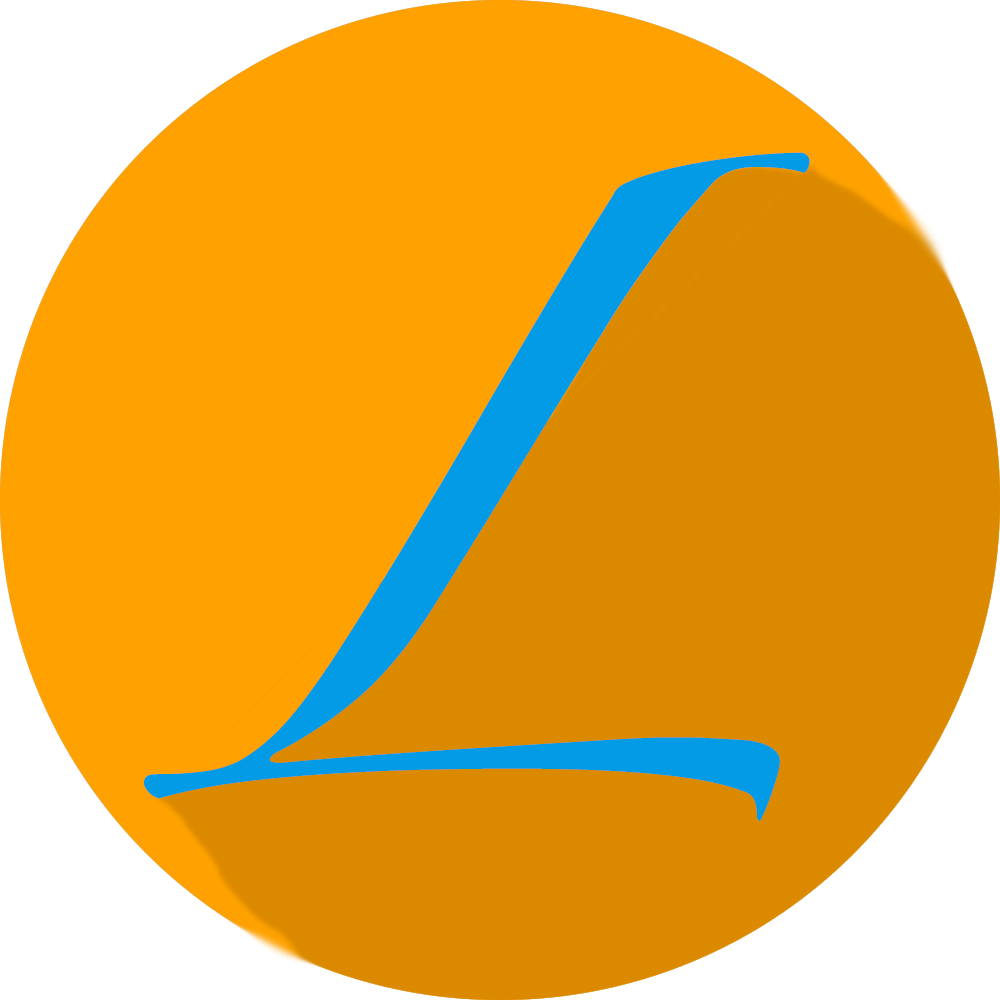
<style>
.page{position:relative;width:1000px;height:1000px;background:#db8a00}
.page>*{position:absolute;margin:0}
.t1{font:563.6px "Zapfino";color:#039be5;scale:1.07 1}
</style>
<div class="page">
<p class="t1" style="left:144px;top:152px;width:666px;height:669px">L</p>
</div>
